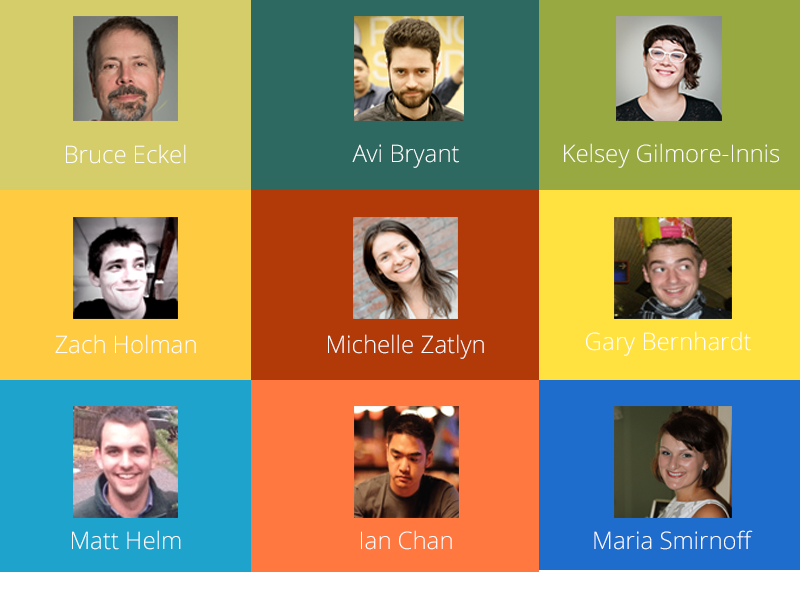
<style>
.page{position:relative;width:800px;height:600px}
.page>*{position:absolute;margin:0}
.t1{font:24px "OpenSans-Light";color:#ffffff}
</style>
<div class="page">
<p class="t1" style="left:66px;top:144px;width:120px;height:20px">Bruce Eckel</p>
<p class="t1" style="left:352px;top:144px;width:107px;height:24px">Avi Bryant</p>
<p class="t1" style="left:564px;top:143px;width:215px;height:25px">Kelsey Gilmore-Innis</p>
<p class="t1" style="left:55px;top:334px;width:141px;height:20px">Zach Holman</p>
<p class="t1" style="left:328px;top:334px;width:156px;height:25px">Michelle Zatlyn</p>
<p class="t1" style="left:586px;top:331px;width:165px;height:25px">Gary Bernhardt</p>
<p class="t1" style="left:72px;top:530px;width:109px;height:20px">Matt Helm</p>
<p class="t1" style="left:361px;top:530px;width:91px;height:20px">Ian Chan</p>
<p class="t1" style="left:594px;top:530px;width:159px;height:20px">Maria Smirnoff</p>
</div>
